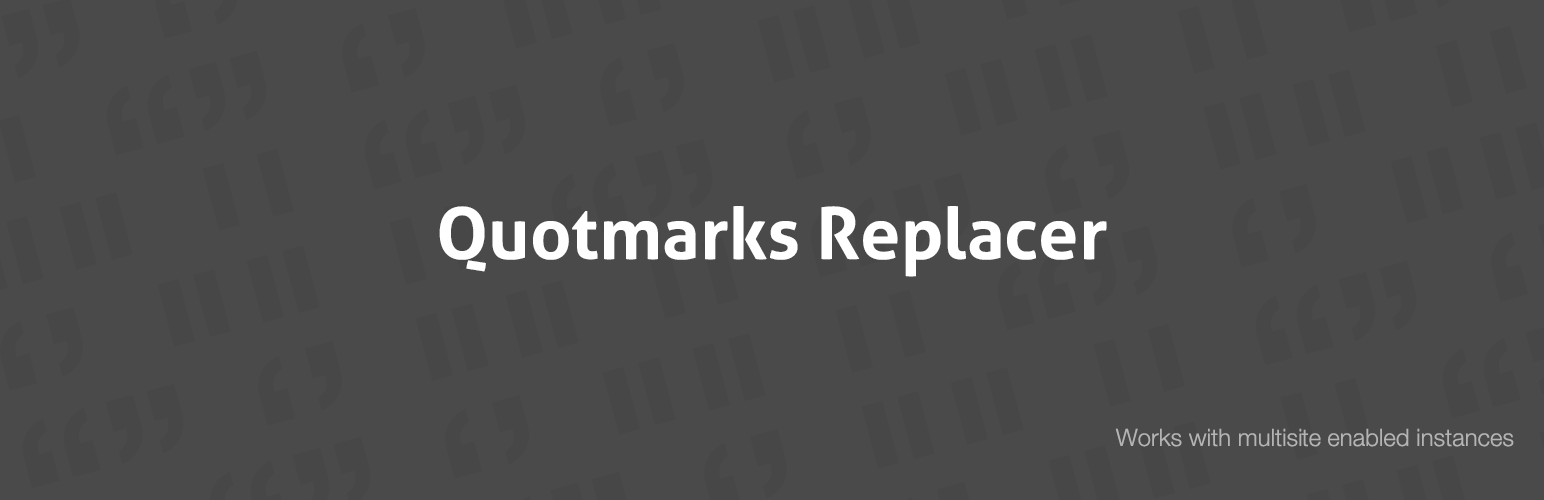
<style>
.page{position:relative;width:1544px;height:500px;background:#4a4a4a}
.page>*{position:absolute;margin:0}
.t1{font:72px "Aller-Bold";color:#ffffff}
.t2{font:24px "HelveticaNeue-Light";color:#b4b4b4}
</style>
<div class="page">
<p class="t1" style="left:439px;top:206px;width:668px;height:71px">Quotmarks Replacer</p>
<p class="t2" style="left:1115px;top:428px;width:399px;height:19px">Works with multisite enabled instances</p>
</div>
